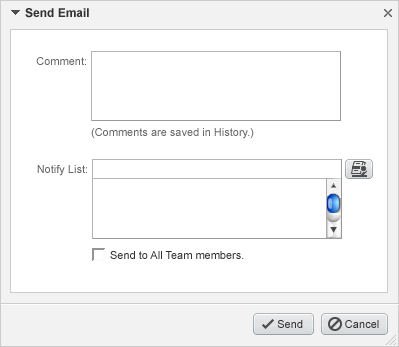
<style>
.page{position:relative;width:399px;height:347px;background:#ffffff}
.page>*{position:absolute;margin:0}
.t1{font:12px "Arial-BoldMT";color:#333333}
.t2{font:11px "ArialMT";color:#666666}
.t3{font:11px "ArialMT";color:#333333}
.t4{font:11px "ArialMT";letter-spacing:0.005em;color:#333333}
</style>
<div class="page">
<p class="t1" style="left:25px;top:8px;width:64px;height:10px">Send Email</p>
<p class="t2" style="left:36px;top:57px;width:50px;height:8px">Comment:</p>
<p class="t2" style="left:91px;top:128px;width:163px;height:11px">(Comments are saved in History.)</p>
<p class="t2" style="left:37px;top:165px;width:50px;height:11px">Notify List:</p>
<p class="t3" style="left:110px;top:251px;width:134px;height:8px">Send to All Team members.</p>
<p class="t3" style="left:277px;top:320px;width:26px;height:8px">Send</p>
<p class="t4" style="left:345px;top:320px;width:34px;height:8px">Cancel</p>
</div>
